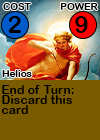
<style>
.page{position:relative;width:100px;height:140px;background:#795b01}
.page>*{position:absolute;margin:0}
.t1{font:9.7px "ArialRoundedMTBold";letter-spacing:0.01em;color:#000000}
.t2{font:24px "ArialRoundedMTBold";letter-spacing:0.01em;color:#000000}
.t3{font:24px "ArialRoundedMTBold";letter-spacing:-0.1em;color:#000000}
.t4{font:12px/10px "ArialRoundedMTBold";letter-spacing:0.01em;color:#000000}
</style>
<div class="page">
<p class="t1" style="left:3px;top:3px;width:28px;height:7px">COST</p>
<p class="t1" style="left:60px;top:3px;width:38px;height:7px">POWER</p>
<p class="t2" style="left:8px;top:16px;width:13px;height:17px">2</p>
<p class="t3" style="left:75px;top:16px;width:13px;height:17px">9</p>
<p class="t1" style="left:2px;top:70px;width:30px;height:7px">Helios</p>
<p class="t4" style="left:1px;top:85px;width:73px;height:29px">End of Turn:<br>Discard this<br>card</p>
</div>
